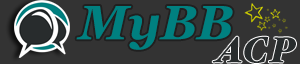
<style>
.page{position:relative;width:300px;height:64px;background:#333333}
.page>*{position:absolute;margin:0}
.t1{font:48px "Georgia-BoldItalic";color:#008080}
</style>
<div class="page">
<p class="t1" style="left:76px;top:6px;width:157px;height:44px">MyBB</p>
</div>
